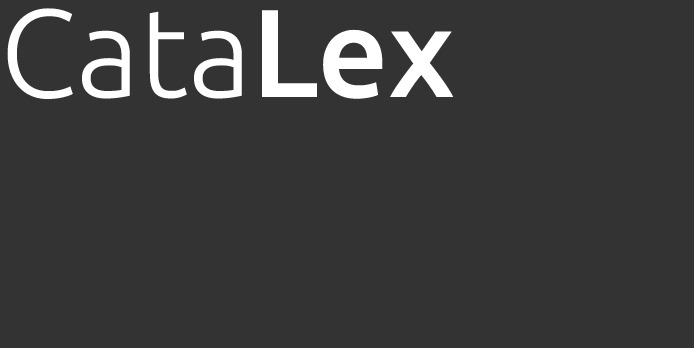
<style>
.page{position:relative;width:694px;height:348px;background:#333333}
.page>*{position:absolute;margin:0}
.t1{font:125px "Ubuntu-Light";color:#ffffff}
.t2{font:125px "Ubuntu-Medium";color:#ffffff}
</style>
<div class="page">
<p class="t1" style="left:7px;top:8px;width:447px;height:91px">Cata<span class="t2">Lex</span></p>
</div>
